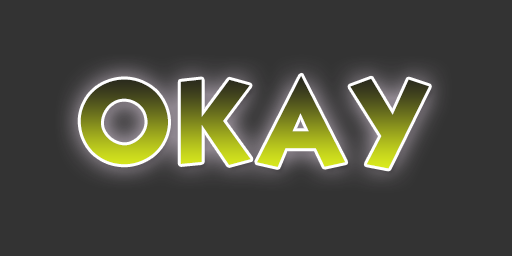
<style>
.page{position:relative;width:512px;height:256px;background:#333333}
.page>*{position:absolute;margin:0}
.t1{font:100px "KabelBdNormal"}
</style>
<div class="page">
<p class="t1" style="left:80px;top:75px;width:349px;height:94px">OKAY</p>
</div>
